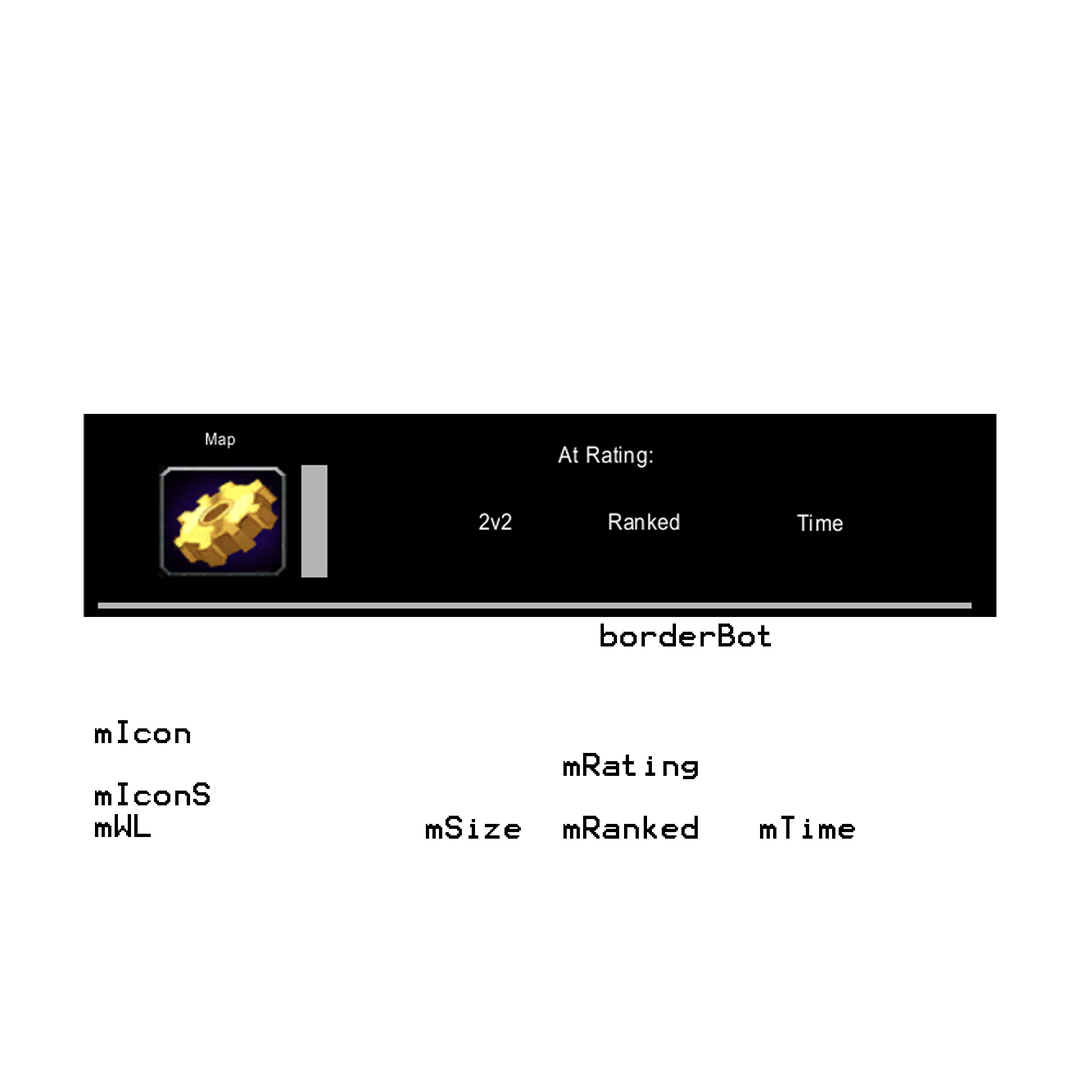
<style>
.page{position:relative;width:1092px;height:1092px;background:#ffffff}
.page>*{position:absolute;margin:0}
.t1{font:26.2px "Terminal";color:#000000}
</style>
<div class="page">
<p class="t1" style="left:601px;top:624px;width:170px;height:22px">borderBot</p>
<p class="t1" style="left:95px;top:720px;width:95px;height:23px">mIcon</p>
<p class="t1" style="left:426px;top:753px;width:429px;height:86px">mRating<br><br>mSize  mRanked   mTime</p>
<p class="t1" style="left:95px;top:782px;width:115px;height:55px">mIconS<br>mWL</p>
</div>
